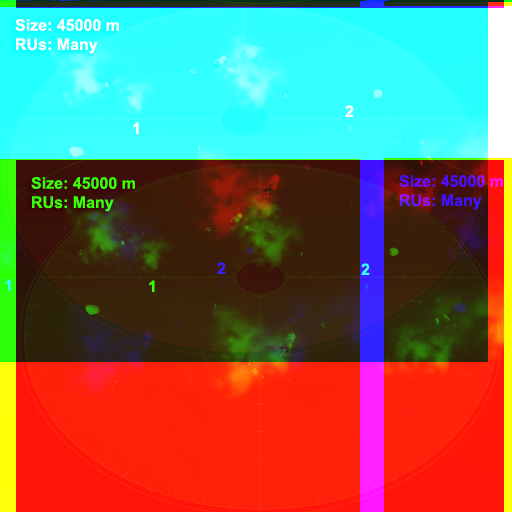
<style>
.page{position:relative;width:512px;height:512px}
.page>*{position:absolute;margin:0}
.t1{font:16px "Arial-BoldMT"}
.t2{font:16px "Arial-BoldMT";color:#ffffff}
</style>
<div class="page">
<p class="t1" style="left:15px;top:17px;width:104px;height:35px">Size: 45000 m<br>RUs: Many</p>
<p class="t2" style="left:133px;top:120px;width:6px;height:12px">1</p>
</div>
